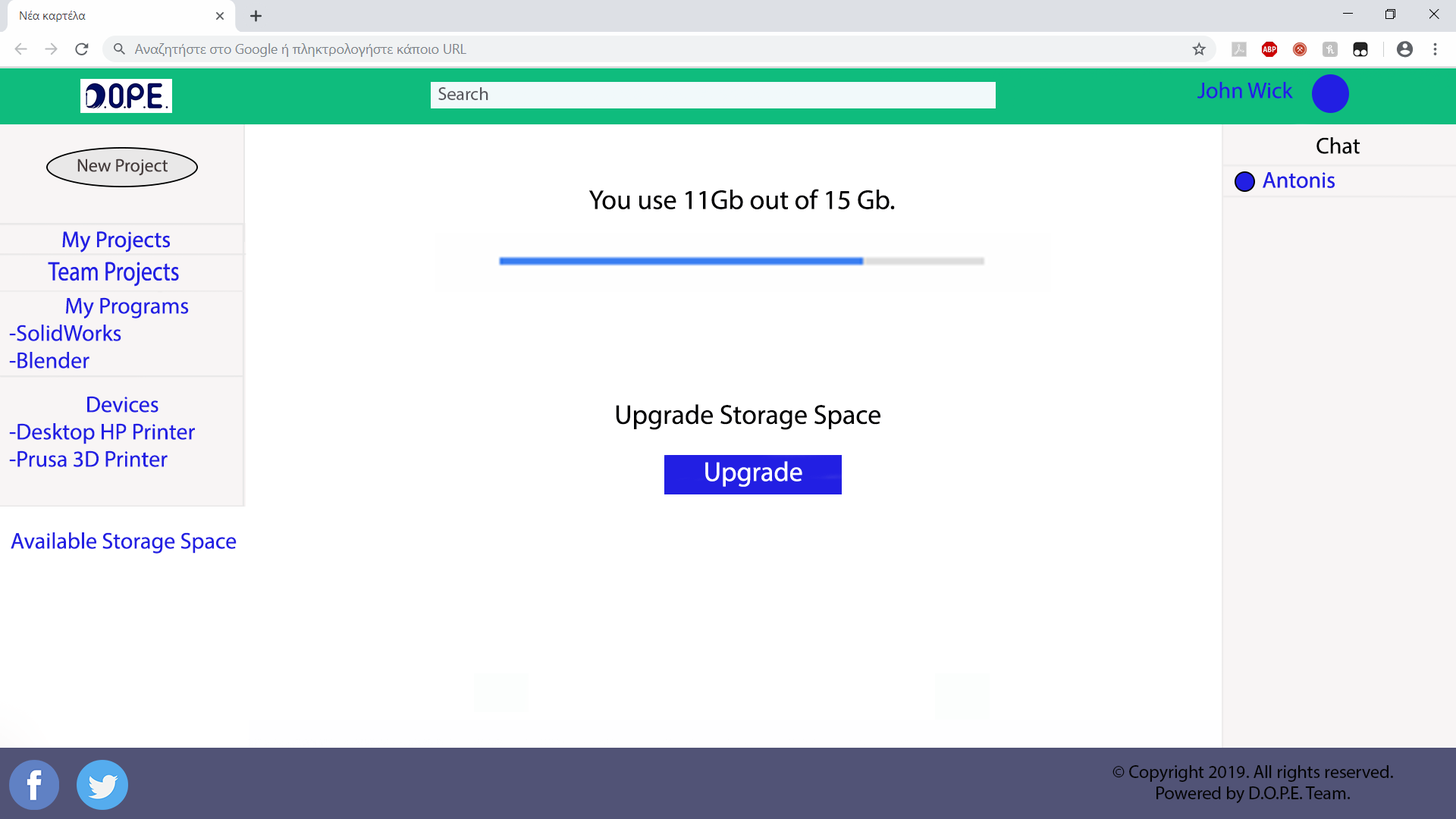
<style>
.page{position:relative;width:1456px;height:819px;background:#ffffff}
.page>*{position:absolute;margin:0}
.t1{font:18.2px "MyriadPro-Regular";color:#57575d}
.t2{font:22.7px "MyriadPro-Regular";color:#221fe3}
.t3{font:22.7px "MyriadPro-Regular";color:#000201}
.t4{font:18.2px "MyriadPro-Regular";color:#463d3d}
.t5{font:27.3px "MyriadPro-Regular";color:#010102}
.t6{font:27.3px "MyriadPro-Regular";color:#ffffff}
.t7{font:18.2px "MyriadPro-Regular";color:#050505}
</style>
<div class="page">
<p class="t1" style="left:438px;top:87px;width:50px;height:13px">Search</p>
<p class="t2" style="left:1197px;top:82px;width:96px;height:17px">John Wick</p>
<p class="t3" style="left:1316px;top:137px;width:44px;height:17px">Chat</p>
<p class="t4" style="left:77px;top:158px;width:91px;height:18px">New Project</p>
<p class="t5" style="left:588px;top:189px;width:307px;height:20px">You use 11Gb out of 15 Gb.</p>
<p class="t2" style="left:9px;top:297px;width:180px;height:72px;text-align:center">My Programs<br>-SolidWorks<br>-Blender</p>
<p class="t2" style="left:87px;top:396px;width:71px;height:17px">Devices</p>
<p class="t5" style="left:616px;top:404px;width:264px;height:26px">Upgrade Storage Space</p>
<p class="t2" style="left:9px;top:423px;width:186px;height:44px">-Desktop HP Printer<br>-Prusa 3D Printer</p>
<p class="t6" style="left:705px;top:461px;width:97px;height:26px">Upgrade</p>
<p class="t2" style="left:11px;top:532px;width:226px;height:22px">Available Storage Space</p>
<p class="t7" style="left:1112px;top:765px;width:281px;height:38px;text-align:center">© Copyright 2019. All rights reserved. Powered by D.O.P.E. Team.</p>
</div>
